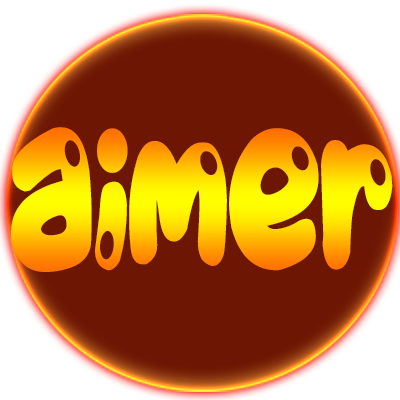
<style>
.page{position:relative;width:400px;height:400px;background:#6d1603}
.page>*{position:absolute;margin:0}
.t1{font:149.1px "JuicyFruity";scale:0.65 1}
</style>
<div class="page">
<p class="t1" style="left:11px;top:127px;width:382px;height:145px">aimer</p>
</div>
